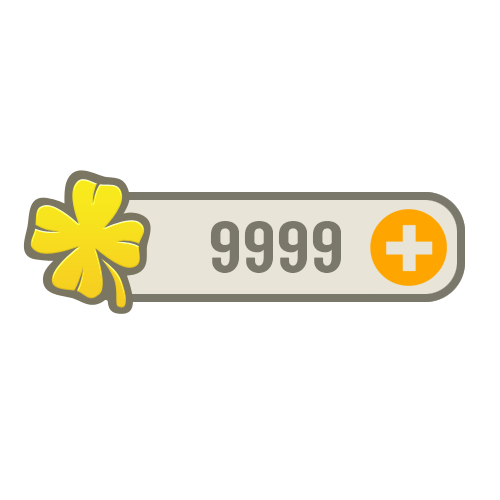
<style>
.page{position:relative;width:500px;height:500px;background:#ffffff}
.page>*{position:absolute;margin:0}
.t1{font:72px "Langdon";color:#7a776b}
</style>
<div class="page">
<p class="t1" style="left:210px;top:221px;width:131px;height:52px">9999</p>
</div>
